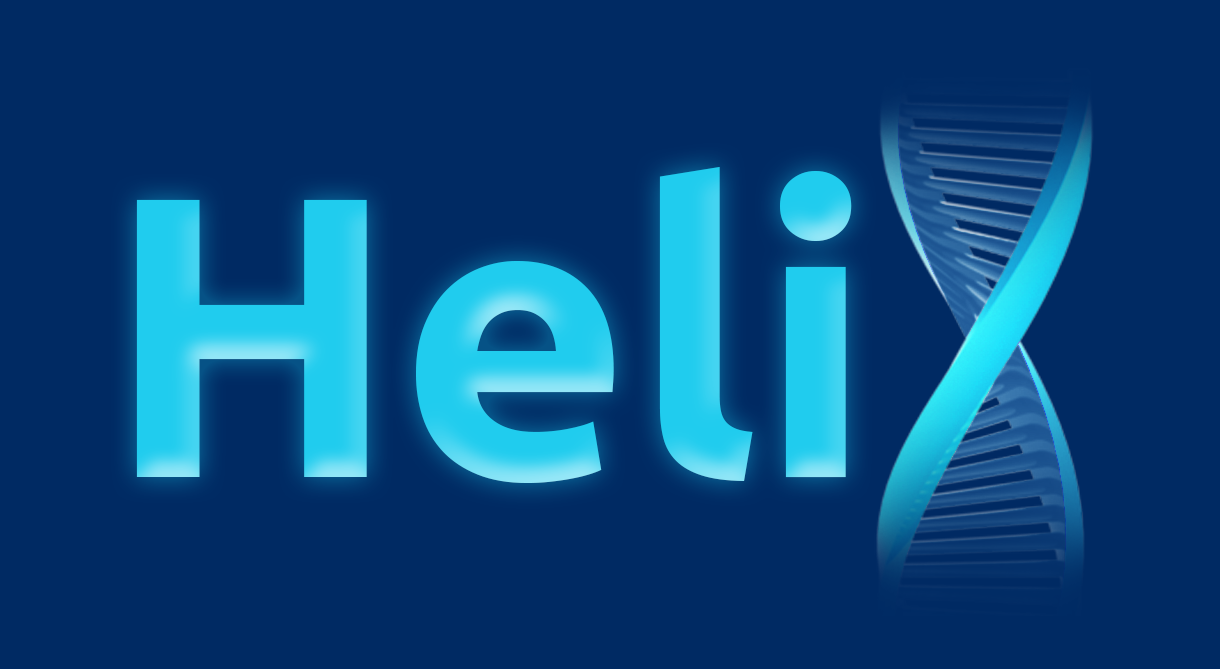
<style>
.page{position:relative;width:1220px;height:669px;background:#002a63}
.page>*{position:absolute;margin:0}
.t1{font:400px "Ubuntu-Bold";color:#20ccee}
</style>
<div class="page">
<p class="t1" style="left:136px;top:166px;width:716px;height:317px">Heli</p>
</div>
